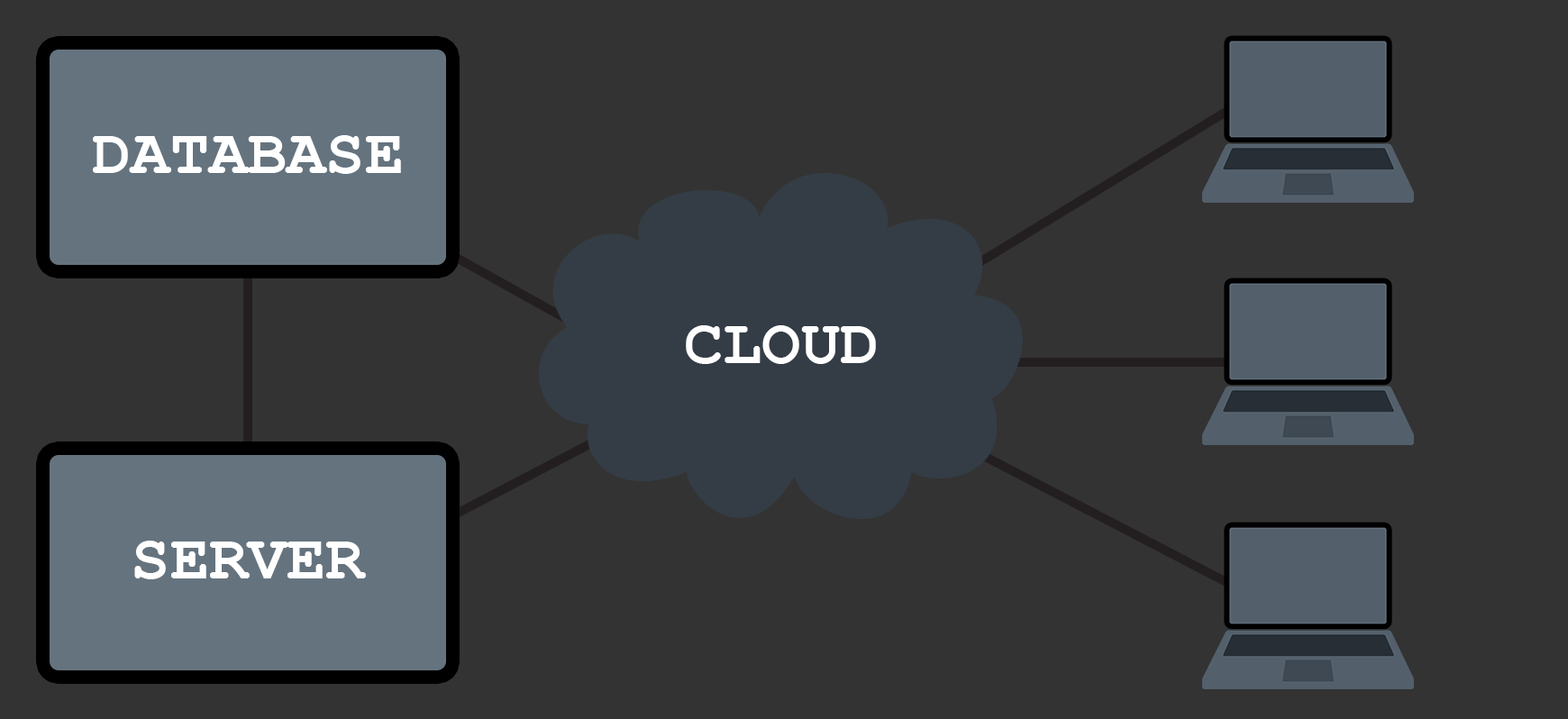
<style>
.page{position:relative;width:1568px;height:719px;background:#333333}
.page>*{position:absolute;margin:0}
.t1{font:64.9px "CourierNewPS-BoldMT";color:#ffffff}
</style>
<div class="page">
<p class="t1" style="left:93px;top:135px;width:308px;height:39px">DATABASE</p>
<p class="t1" style="left:686px;top:325px;width:190px;height:39px">CLOUD</p>
<p class="t1" style="left:134px;top:541px;width:232px;height:38px">SERVER</p>
</div>
